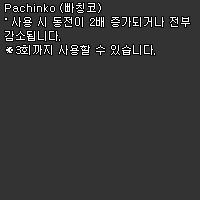
<style>
.page{position:relative;width:200px;height:200px;background:#333333}
.page>*{position:absolute;margin:0}
.t1{font:11px/14px "Dotum";color:#ffffff}
</style>
<div class="page">
<p class="t1" style="left:5px;top:3px;width:185px;height:52px">Pachinko (빠칭코)<br>˚ 사용 시 동전이 2배 증가되거나 전부<br>감소됩니다.<br>※3회까지 사용할 수 있습니다.</p>
</div>
